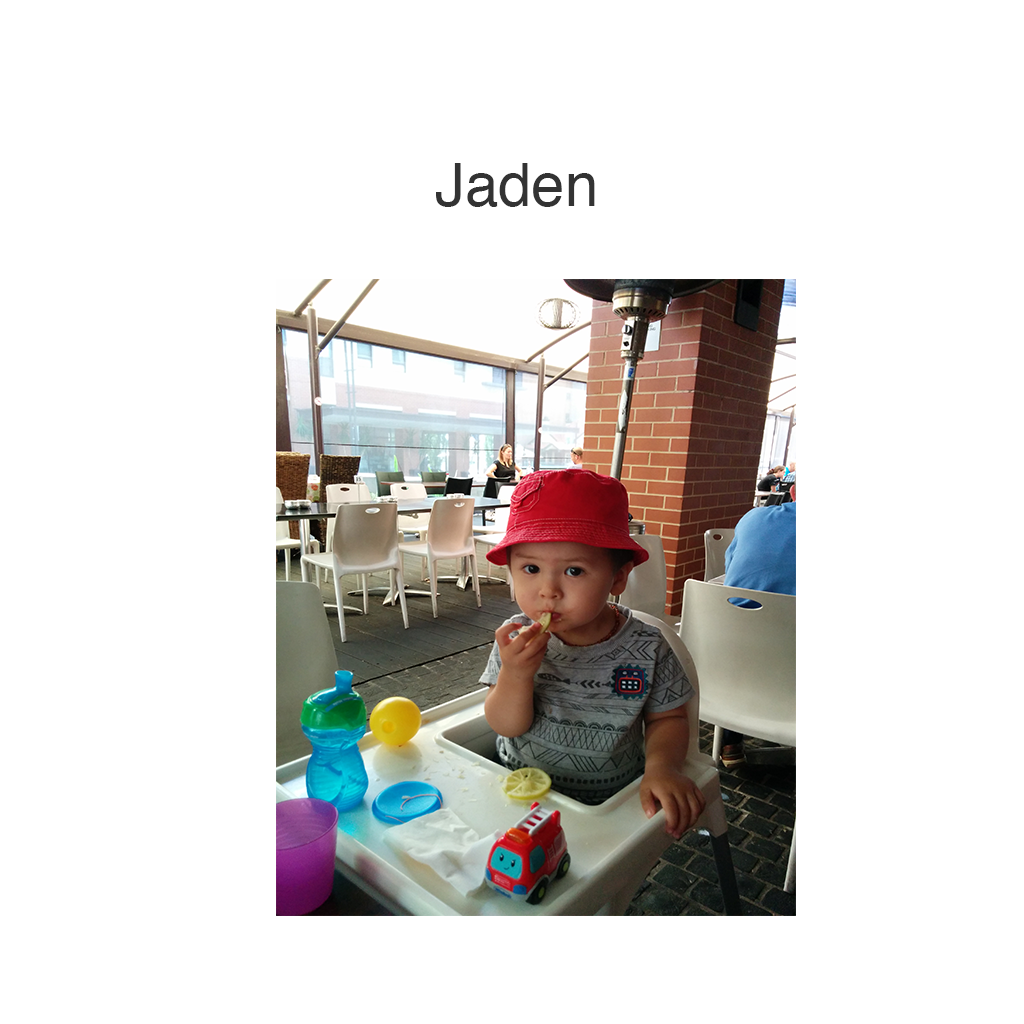
<style>
.page{position:relative;width:1024px;height:1024px;background:#ffffff}
.page>*{position:absolute;margin:0}
.t1{font:60px "Helvetica";color:#333333}
</style>
<div class="page">
<p class="t1" style="left:436px;top:163px;width:159px;height:44px">Jaden</p>
</div>
